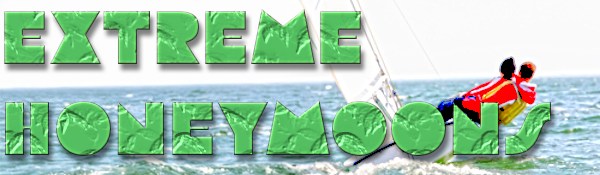
<style>
.page{position:relative;width:600px;height:175px}
.page>*{position:absolute;margin:0}
.t1{font:75.8px "Flegrei-Regular";color:#53bf60}
</style>
<div class="page">
<p class="t1" style="left:4px;top:9px;width:547px;height:147px">Extreme Honeymoons</p>
</div>
